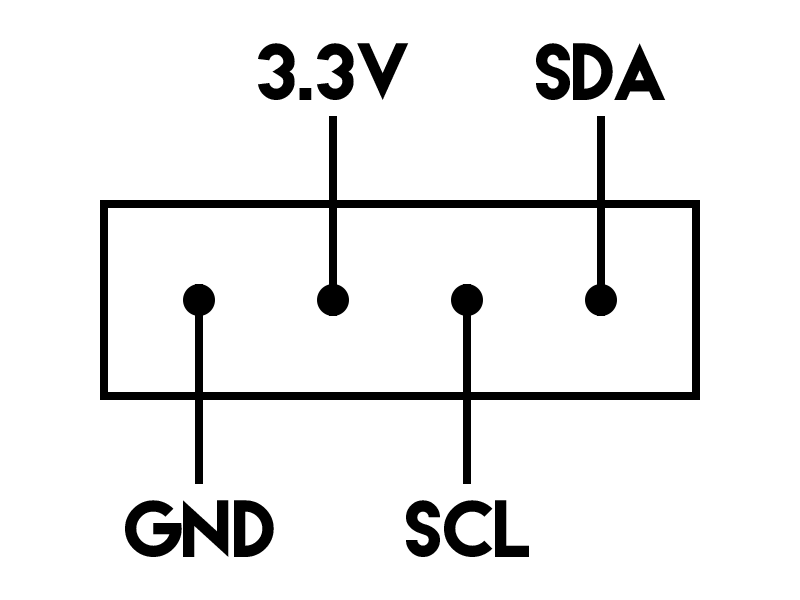
<style>
.page{position:relative;width:800px;height:600px;background:#ffffff}
.page>*{position:absolute;margin:0}
.t1{font:72px "LemonMilk";letter-spacing:-0.02em;color:#000000}
</style>
<div class="page">
<p class="t1" style="left:258px;top:43px;width:151px;height:57px">3.3v</p>
<p class="t1" style="left:536px;top:43px;width:130px;height:57px">SDA</p>
<p class="t1" style="left:125px;top:500px;width:149px;height:57px">GND</p>
<p class="t1" style="left:406px;top:500px;width:123px;height:57px">SCL</p>
</div>
